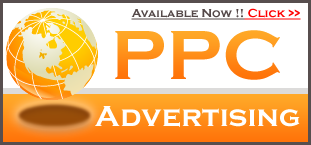
<style>
.page{position:relative;width:311px;height:145px;background:#ffffff}
.page>*{position:absolute;margin:0}
.t1{font:12px "CopperplateGothic-Bold";letter-spacing:0.01em;color:#544848;text-decoration:underline}
.t2{font:12px "CopperplateGothic-Bold";letter-spacing:0.01em;color:#ff0000;text-decoration:underline}
.t3{font:72px "CopperplateGothic-Bold";letter-spacing:0.01em;color:#ff941c}
.t4{font:30px "CopperplateGothic-Bold";letter-spacing:0.01em;color:#ffffff}
</style>
<div class="page">
<p class="t1" style="left:131px;top:8px;width:170px;height:12px">Available Now !!<span class="t2"> Click &gt;&gt;</span></p>
<p class="t3" style="left:115px;top:30px;width:165px;height:50px">PPC</p>
<p class="t4" style="left:95px;top:106px;width:205px;height:21px">Advertising</p>
</div>
